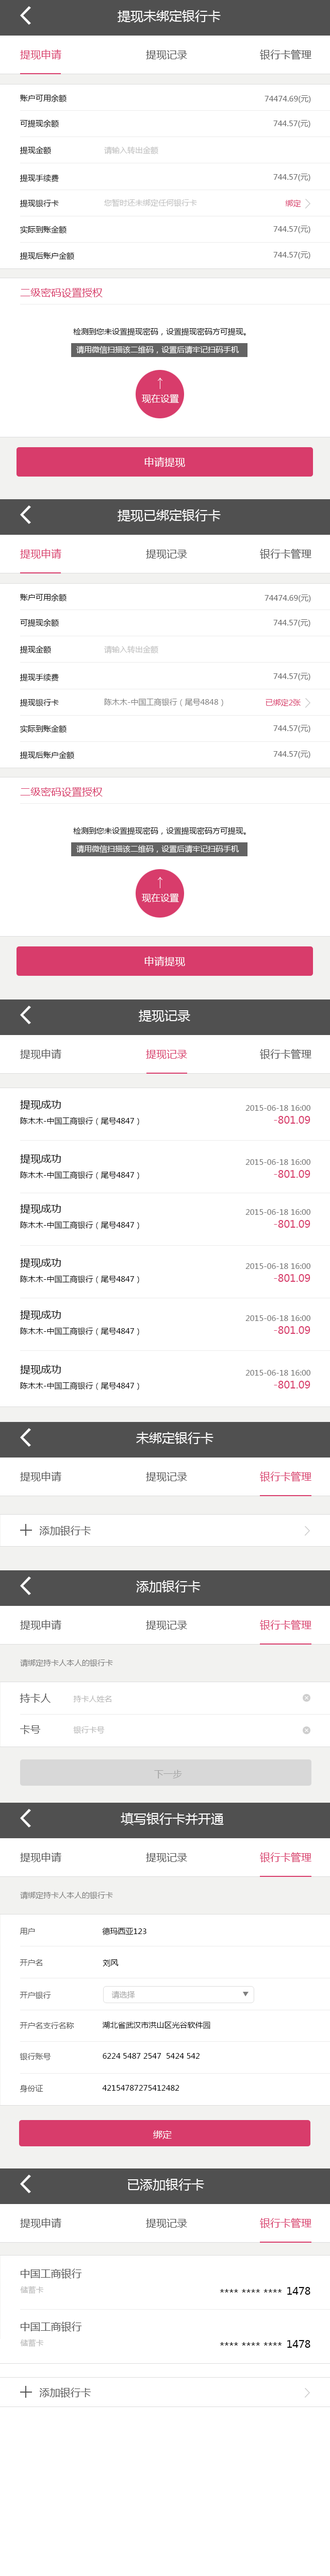
<style>
.page{position:relative;width:330px;height:2576px;background:#ffffff}
.page>*{position:absolute;margin:0}
.t1{font:12.9px "MicrosoftYaHei";color:#ffffff}
.t2{font:10.3px "MicrosoftYaHei";color:#d83c6b}
.t3{font:10.3px "MicrosoftYaHei";color:#535353}
.t4{font:7.7px "MicrosoftYaHei";color:#000000}
.t5{font:7.7px "MicrosoftYaHei";color:#676767}
.t6{font:7.7px "MicrosoftYaHei";color:#bebebe}
.t7{font:7.7px "MicrosoftYaHei";color:#d83c6b}
.t8{font:7.7px "MicrosoftYaHei";color:#ffffff}
.t9{font:9.3px "MicrosoftYaHei";color:#ffffff}
.t10{font:10.3px "MicrosoftYaHei";color:#ffffff}
.t11{font:7.7px "MicrosoftYaHei";color:#818181}
.t12{font:10.3px "MicrosoftYaHei";color:#000000}
.t13{font:7.7px "MicrosoftYaHei";color:#737373}
.t14{font:7.7px "MicrosoftYaHei";color:#7c7c7c}
.t15{font:7.7px "MicrosoftYaHei";color:#b6b6b6}
.t16{font:9.3px "MicrosoftYaHei";color:#a3a3a3}
.t17{font:7.7px "MicrosoftYaHei";color:#535353}
.t18{font:7.7px "MicrosoftYaHei";color:#a1a1a1}
</style>
<div class="page">
<p class="t1" style="left:117px;top:10px;width:104px;height:13px">提现未绑定银行卡</p>
<p class="t2" style="left:20px;top:49px;width:41px;height:11px">提现申请</p>
<p class="t3" style="left:146px;top:50px;width:41px;height:10px">提现记录</p>
<p class="t3" style="left:260px;top:49px;width:51px;height:11px">银行卡管理</p>
<p class="t4" style="left:20px;top:94px;width:46px;height:9px">账户可用余额</p>
<p class="t5" style="left:264px;top:95px;width:47px;height:8px">74474.69(元)</p>
<p class="t4" style="left:20px;top:120px;width:39px;height:8px">可提现余额</p>
<p class="t5" style="left:273px;top:120px;width:37px;height:8px">744.57(元)</p>
<p class="t4" style="left:20px;top:146px;width:31px;height:9px">提现金额</p>
<p class="t6" style="left:104px;top:146px;width:54px;height:9px">请输入转出金额</p>
<p class="t5" style="left:273px;top:174px;width:37px;height:7px">744.57(元)</p>
<p class="t4" style="left:20px;top:174px;width:39px;height:8px">提现手续费</p>
<p class="t4" style="left:20px;top:199px;width:39px;height:9px">提现银行卡</p>
<p class="t6" style="left:104px;top:199px;width:93px;height:8px">您暂时还未绑定任何银行卡</p>
<p class="t7" style="left:285px;top:199px;width:16px;height:8px">绑定</p>
<p class="t4" style="left:20px;top:226px;width:46px;height:8px">实际到账金额</p>
<p class="t5" style="left:273px;top:226px;width:37px;height:7px">744.57(元)</p>
<p class="t4" style="left:20px;top:252px;width:54px;height:8px">提现后账户金额</p>
<p class="t5" style="left:273px;top:251px;width:37px;height:8px">744.57(元)</p>
<p class="t2" style="left:20px;top:288px;width:83px;height:10px">二级密码设置授权</p>
<p class="t4" style="left:73px;top:328px;width:173px;height:8px">检测到您未设置提现密码，设置提现密码方可提现。</p>
<p class="t8" style="left:76px;top:346px;width:163px;height:8px">请用微信扫描该二维码，设置后请牢记扫码手机</p>
<p class="t9" style="left:142px;top:394px;width:37px;height:9px">现在设置</p>
<p class="t10" style="left:144px;top:457px;width:41px;height:10px">申请提现</p>
<p class="t1" style="left:117px;top:509px;width:104px;height:13px">提现已绑定银行卡</p>
<p class="t2" style="left:20px;top:549px;width:41px;height:10px">提现申请</p>
<p class="t3" style="left:146px;top:549px;width:41px;height:10px">提现记录</p>
<p class="t3" style="left:260px;top:549px;width:51px;height:10px">银行卡管理</p>
<p class="t4" style="left:20px;top:594px;width:46px;height:8px">账户可用余额</p>
<p class="t5" style="left:264px;top:595px;width:47px;height:7px">74474.69(元)</p>
<p class="t4" style="left:20px;top:619px;width:39px;height:8px">可提现余额</p>
<p class="t5" style="left:273px;top:619px;width:37px;height:8px">744.57(元)</p>
<p class="t4" style="left:20px;top:646px;width:31px;height:8px">提现金额</p>
<p class="t6" style="left:104px;top:646px;width:54px;height:8px">请输入转出金额</p>
<p class="t4" style="left:20px;top:673px;width:39px;height:9px">提现手续费</p>
<p class="t5" style="left:273px;top:673px;width:37px;height:8px">744.57(元)</p>
<p class="t4" style="left:20px;top:699px;width:39px;height:8px">提现银行卡</p>
<p class="t11" style="left:104px;top:698px;width:119px;height:8px">陈木木-中国工商银行（尾号4848）</p>
<p class="t7" style="left:265px;top:699px;width:35px;height:7px">已绑定2张</p>
<p class="t4" style="left:20px;top:725px;width:46px;height:8px">实际到账金额</p>
<p class="t5" style="left:273px;top:725px;width:37px;height:8px">744.57(元)</p>
<p class="t4" style="left:20px;top:751px;width:54px;height:8px">提现后账户金额</p>
<p class="t5" style="left:273px;top:751px;width:37px;height:7px">744.57(元)</p>
<p class="t2" style="left:20px;top:787px;width:83px;height:10px">二级密码设置授权</p>
<p class="t4" style="left:73px;top:827px;width:173px;height:8px">检测到您未设置提现密码，设置提现密码方可提现。</p>
<p class="t8" style="left:76px;top:845px;width:163px;height:8px">请用微信扫描该二维码，设置后请牢记扫码手机</p>
<p class="t9" style="left:142px;top:893px;width:37px;height:9px">现在设置</p>
<p class="t10" style="left:144px;top:956px;width:41px;height:11px">申请提现</p>
<p class="t1" style="left:139px;top:1010px;width:51px;height:12px">提现记录</p>
<p class="t3" style="left:20px;top:1049px;width:41px;height:10px">提现申请</p>
<p class="t2" style="left:146px;top:1049px;width:41px;height:10px">提现记录</p>
<p class="t3" style="left:260px;top:1049px;width:51px;height:10px">银行卡管理</p>
<p class="t12" style="left:20px;top:1100px;width:41px;height:10px">提现成功</p>
<p class="t13" style="left:245px;top:1105px;width:65px;height:6px">2015-06-18 16:00</p>
<p class="t4" style="left:20px;top:1117px;width:119px;height:8px">陈木木-中国工商银行（尾号4847）</p>
<p class="t2" style="left:274px;top:1116px;width:36px;height:8px">-801.09</p>
<p class="t12" style="left:20px;top:1154px;width:41px;height:10px">提现成功</p>
<p class="t13" style="left:245px;top:1159px;width:65px;height:6px">2015-06-18 16:00</p>
<p class="t4" style="left:20px;top:1171px;width:119px;height:8px">陈木木-中国工商银行（尾号4847）</p>
<p class="t2" style="left:274px;top:1170px;width:36px;height:8px">-801.09</p>
<p class="t12" style="left:20px;top:1204px;width:41px;height:10px">提现成功</p>
<p class="t13" style="left:245px;top:1209px;width:65px;height:6px">2015-06-18 16:00</p>
<p class="t4" style="left:20px;top:1221px;width:119px;height:8px">陈木木-中国工商银行（尾号4847）</p>
<p class="t2" style="left:274px;top:1220px;width:36px;height:8px">-801.09</p>
<p class="t12" style="left:20px;top:1258px;width:41px;height:10px">提现成功</p>
<p class="t13" style="left:245px;top:1263px;width:65px;height:6px">2015-06-18 16:00</p>
<p class="t4" style="left:20px;top:1275px;width:119px;height:8px">陈木木-中国工商银行（尾号4847）</p>
<p class="t2" style="left:274px;top:1274px;width:36px;height:8px">-801.09</p>
<p class="t12" style="left:20px;top:1310px;width:41px;height:10px">提现成功</p>
<p class="t13" style="left:245px;top:1315px;width:65px;height:6px">2015-06-18 16:00</p>
<p class="t4" style="left:20px;top:1327px;width:119px;height:8px">陈木木-中国工商银行（尾号4847）</p>
<p class="t2" style="left:274px;top:1326px;width:36px;height:8px">-801.09</p>
<p class="t12" style="left:20px;top:1365px;width:41px;height:10px">提现成功</p>
<p class="t13" style="left:245px;top:1370px;width:65px;height:6px">2015-06-18 16:00</p>
<p class="t4" style="left:20px;top:1382px;width:119px;height:8px">陈木木-中国工商银行（尾号4847）</p>
<p class="t2" style="left:274px;top:1381px;width:36px;height:7px">-801.09</p>
<p class="t1" style="left:136px;top:1432px;width:77px;height:12px">未绑定银行卡</p>
<p class="t3" style="left:20px;top:1471px;width:41px;height:11px">提现申请</p>
<p class="t3" style="left:146px;top:1472px;width:41px;height:10px">提现记录</p>
<p class="t2" style="left:260px;top:1471px;width:51px;height:11px">银行卡管理</p>
<p class="t3" style="left:39px;top:1526px;width:52px;height:10px">添加银行卡</p>
<p class="t1" style="left:136px;top:1580px;width:64px;height:12px">添加银行卡</p>
<p class="t3" style="left:20px;top:1620px;width:41px;height:10px">提现申请</p>
<p class="t3" style="left:146px;top:1620px;width:41px;height:10px">提现记录</p>
<p class="t2" style="left:260px;top:1620px;width:51px;height:10px">银行卡管理</p>
<p class="t14" style="left:20px;top:1659px;width:93px;height:8px">请绑定持卡人本人的银行卡</p>
<p class="t3" style="left:20px;top:1693px;width:31px;height:10px">持卡人</p>
<p class="t15" style="left:73px;top:1696px;width:38px;height:6px">持卡人姓名</p>
<p class="t8" style="left:304px;top:1696px;width:4px;height:4px">×</p>
<p class="t3" style="left:20px;top:1725px;width:21px;height:9px">卡号</p>
<p class="t15" style="left:73px;top:1726px;width:32px;height:8px">银行卡号</p>
<p class="t8" style="left:304px;top:1728px;width:4px;height:4px">×</p>
<p class="t16" style="left:154px;top:1770px;width:28px;height:8px">下一步</p>
<p class="t1" style="left:121px;top:1812px;width:103px;height:13px">填写银行卡并开通</p>
<p class="t3" style="left:20px;top:1852px;width:41px;height:10px">提现申请</p>
<p class="t3" style="left:146px;top:1853px;width:41px;height:9px">提现记录</p>
<p class="t2" style="left:260px;top:1852px;width:51px;height:10px">银行卡管理</p>
<p class="t14" style="left:20px;top:1891px;width:93px;height:8px">请绑定持卡人本人的银行卡</p>
<p class="t17" style="left:20px;top:1928px;width:15px;height:7px">用户</p>
<p class="t4" style="left:102px;top:1927px;width:44px;height:8px">德玛西亚123</p>
<p class="t17" style="left:20px;top:1959px;width:22px;height:7px">开户名</p>
<p class="t4" style="left:103px;top:1959px;width:15px;height:8px">刘风</p>
<p class="t17" style="left:20px;top:1991px;width:31px;height:8px">开户银行</p>
<p class="t18" style="left:111px;top:1991px;width:24px;height:8px">请选择</p>
<p class="t4" style="left:102px;top:2021px;width:108px;height:8px">湖北省武汉市洪山区光谷软件园</p>
<p class="t17" style="left:20px;top:2022px;width:54px;height:7px">开户名支行名称</p>
<p class="t17" style="left:20px;top:2053px;width:31px;height:7px">银行账号</p>
<p class="t4" style="left:103px;top:2053px;width:96px;height:6px">6224 5487 2547  5424 542</p>
<p class="t17" style="left:20px;top:2084px;width:23px;height:8px">身份证</p>
<p class="t4" style="left:102px;top:2085px;width:77px;height:6px">42154787275412482</p>
<p class="t9" style="left:153px;top:2130px;width:19px;height:9px">绑定</p>
<p class="t1" style="left:128px;top:2178px;width:76px;height:13px">已添加银行卡</p>
<p class="t3" style="left:20px;top:2218px;width:41px;height:10px">提现申请</p>
<p class="t3" style="left:146px;top:2218px;width:41px;height:10px">提现记录</p>
<p class="t2" style="left:260px;top:2218px;width:51px;height:10px">银行卡管理</p>
<p class="t3" style="left:21px;top:2268px;width:61px;height:11px">中国工商银行</p>
<p class="t15" style="left:20px;top:2286px;width:24px;height:8px">储蓄卡</p>
<p class="t12" style="left:219px;top:2289px;width:63px;height:4px">**** **** ****</p>
<p class="t12" style="left:287px;top:2287px;width:23px;height:8px">1478</p>
<p class="t3" style="left:21px;top:2321px;width:61px;height:11px">中国工商银行</p>
<p class="t15" style="left:20px;top:2339px;width:24px;height:8px">储蓄卡</p>
<p class="t12" style="left:219px;top:2342px;width:63px;height:4px">**** **** ****</p>
<p class="t12" style="left:287px;top:2340px;width:23px;height:8px">1478</p>
<p class="t3" style="left:39px;top:2387px;width:52px;height:11px">添加银行卡</p>
</div>
